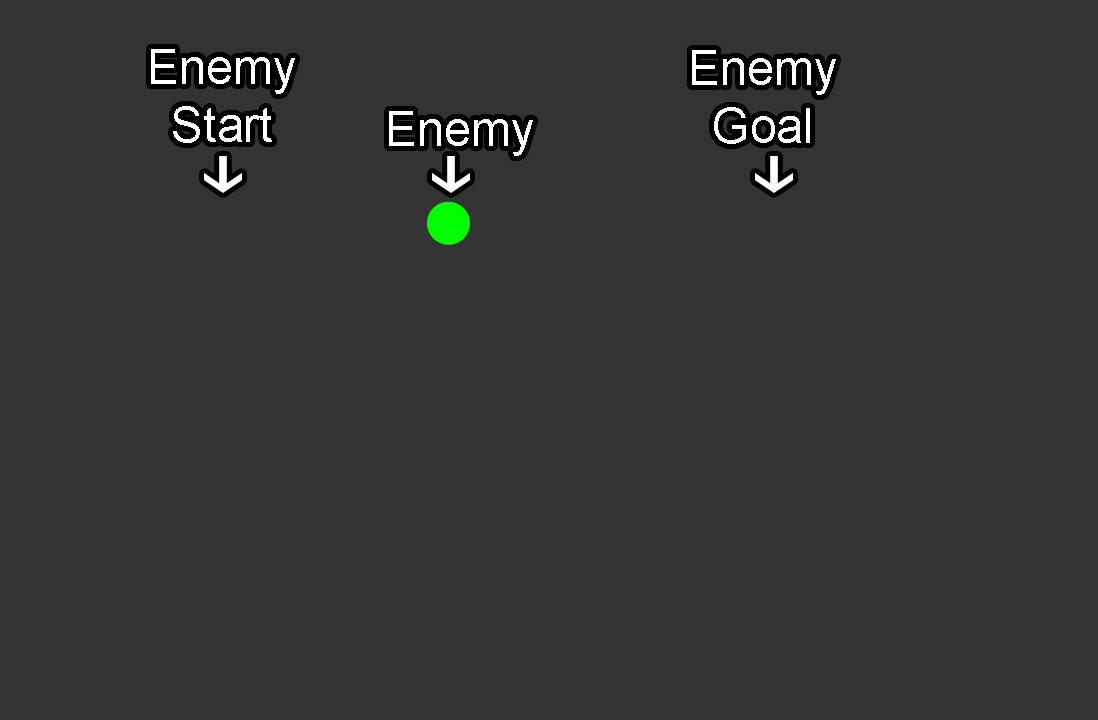
<style>
.page{position:relative;width:1098px;height:720px;background:#333333}
.page>*{position:absolute;margin:0}
.t1{font:48px "ArialMT";color:#ffffff}
</style>
<div class="page">
<p class="t1" style="left:151px;top:49px;width:144px;height:94px;text-align:center">Enemy<br>Start</p>
<p class="t1" style="left:692px;top:50px;width:144px;height:94px;text-align:center">Enemy<br>Goal</p>
<p class="t1" style="left:389px;top:111px;width:144px;height:45px">Enemy</p>
</div>
